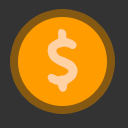
<style>
.page{position:relative;width:128px;height:128px;background:#333333}
.page>*{position:absolute;margin:0}
.t1{font:75.7px "DuperPro-Bold";color:#ffd1a3}
</style>
<div class="page">
<p class="t1" style="left:47px;top:29px;width:31px;height:63px">$</p>
</div>
